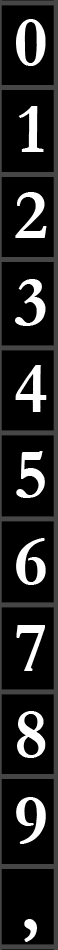
<style>
.page{position:relative;width:58px;height:950px;background:#000000}
.page>*{position:absolute;margin:0}
.t1{font:72px "Garamond-Bold";color:#ffffff}
</style>
<div class="page">
<p class="t1" style="left:15px;top:19px;width:32px;height:923px;text-align:center">0<br>1<br>2<br>3<br>4<br>5<br>6<br>7<br>8<br>9<br>,</p>
</div>
